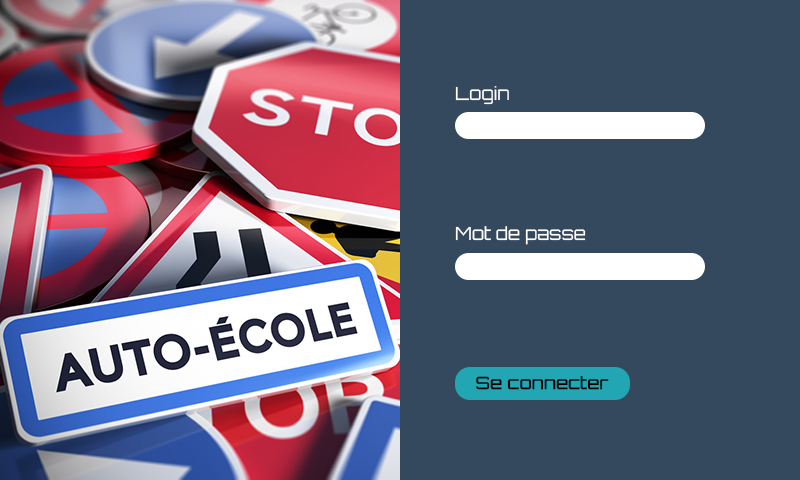
<style>
.page{position:relative;width:800px;height:480px;background:#34495e}
.page>*{position:absolute;margin:0}
.t1{font:18px "Orbitron-Regular";color:#ffffff}
.t2{font:17px "Orbitron-Regular";color:#000000;font-weight:bold}
</style>
<div class="page">
<p class="t1" style="left:455px;top:86px;width:54px;height:19px">Login</p>
<p class="t1" style="left:455px;top:226px;width:131px;height:19px">Mot de passe</p>
<p class="t2" style="left:476px;top:375px;width:133px;height:15px">Se connecter</p>
</div>
